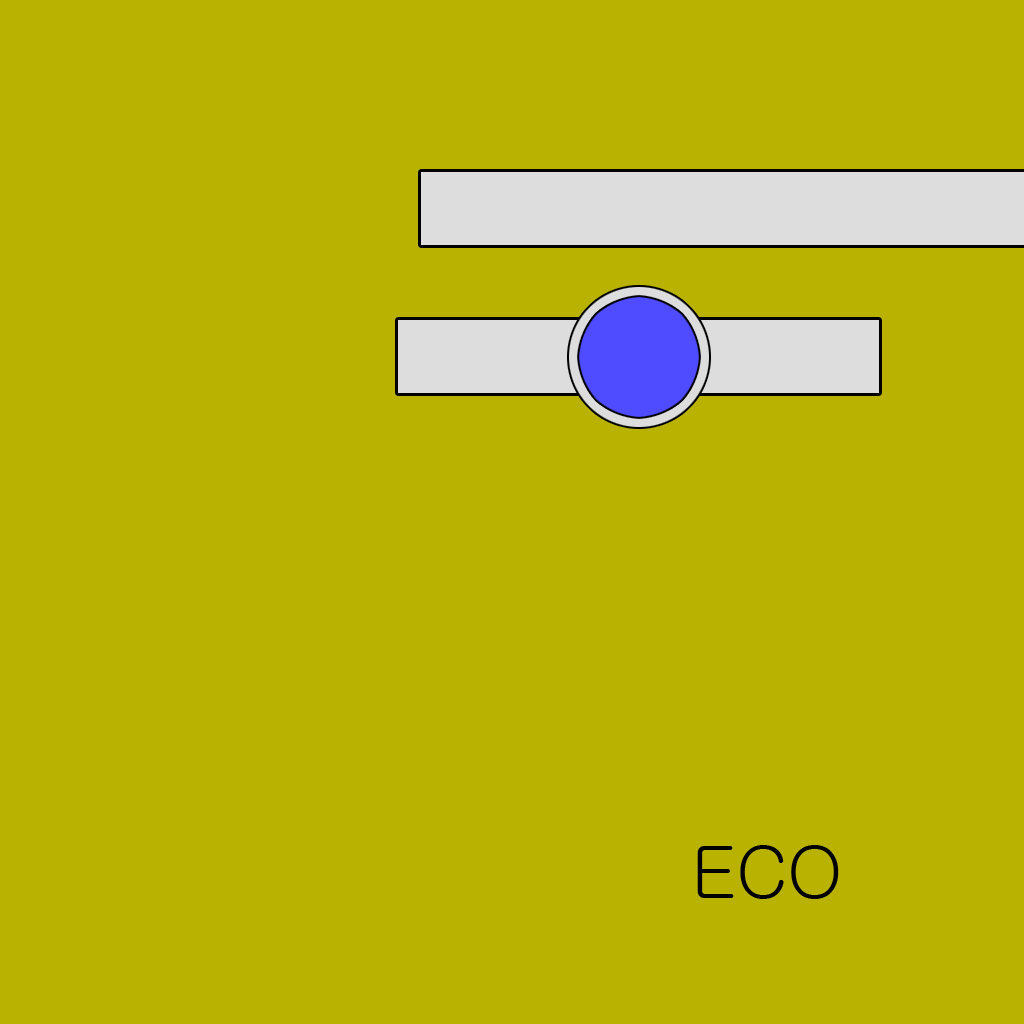
<style>
.page{position:relative;width:1024px;height:1024px;background:#b9b200}
.page>*{position:absolute;margin:0}
.t1{font:72px "Gulim";color:#010101}
</style>
<div class="page">
<p class="t1" style="left:697px;top:845px;width:142px;height:54px">ECO</p>
</div>
